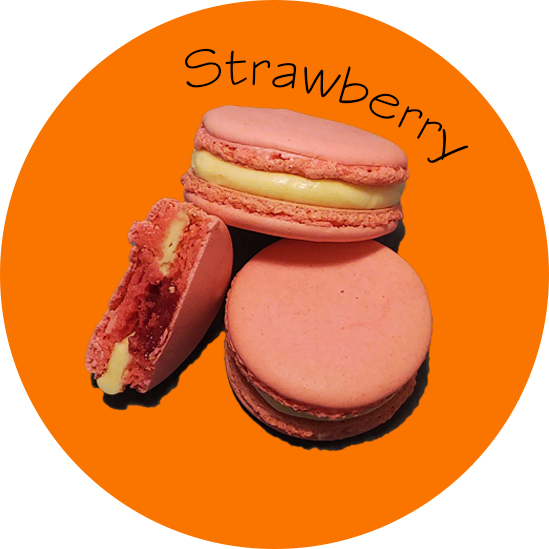
<style>
.page{position:relative;width:549px;height:549px;background:#fa7500}
.page>*{position:absolute;margin:0}
.t1{font:55.5px "StylusBT";color:#000000;scale:0.94 1}
</style>
<div class="page">
<p class="t1" style="left:185px;top:48px;width:284px;height:115px;rotate:18deg">Strawberry</p>
</div>
